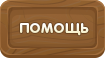
<style>
.page{position:relative;width:105px;height:58px}
.page>*{position:absolute;margin:0}
.t1{font:14px "RotondaC-Bold";letter-spacing:0.06em;color:#fbf8e6;text-transform:uppercase}
</style>
<div class="page">
<p class="t1" style="left:20px;top:23px;width:69px;height:13px">Помощь</p>
</div>
